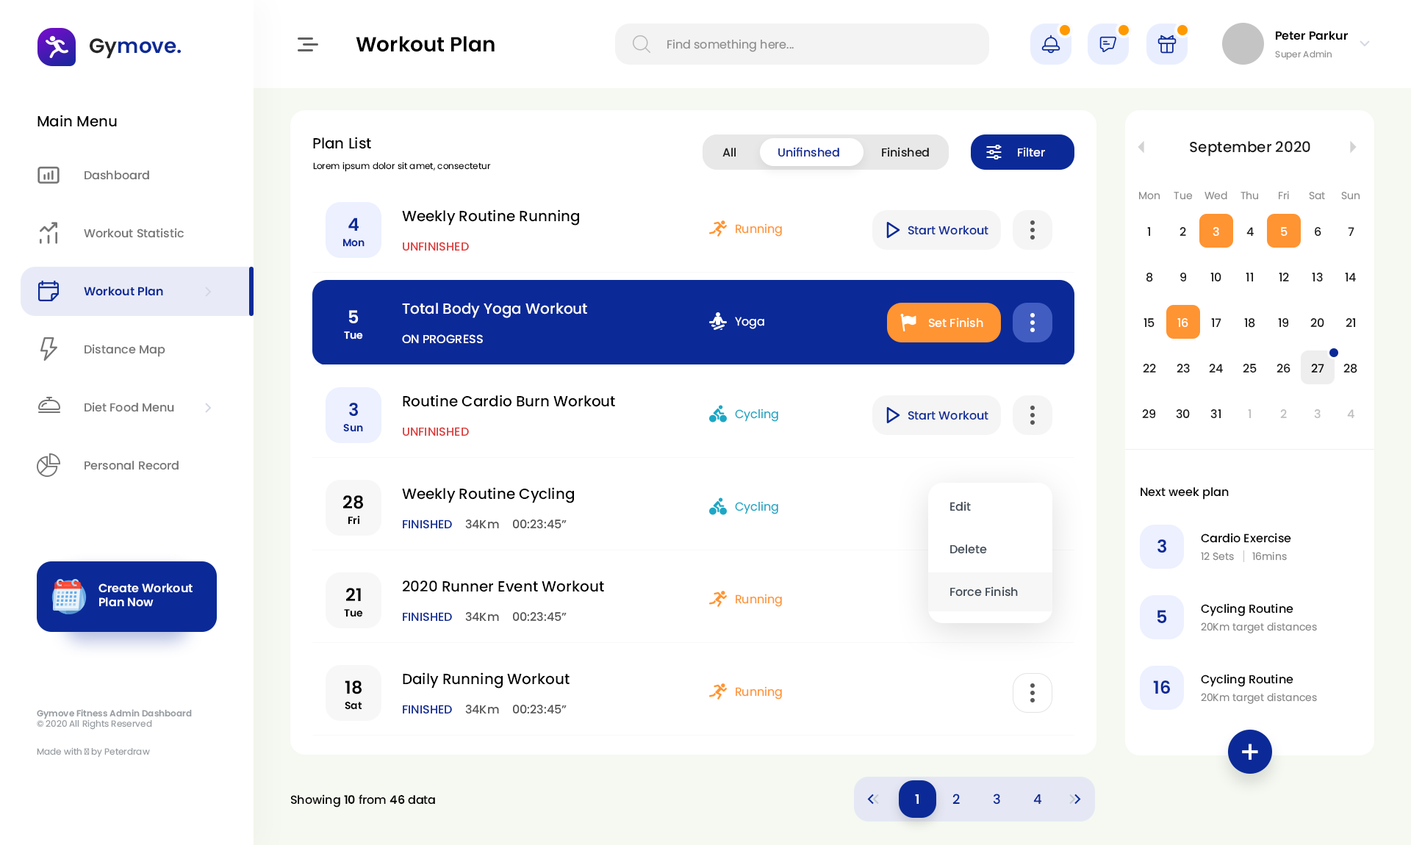
<style>
.page{position:relative;width:1411px;height:845px;background:#ffffff}
.page>*{position:absolute;margin:0}
.t1{font:20.6px "Poppins-SemiBold";color:#0b2a97}
.t2{font:20.6px "Poppins-SemiBold";color:#262626}
.t3{font:20.6px "Poppins-SemiBold";color:#000000}
.t4{font:11.8px "Poppins-Regular";color:#8d8d8d}
.t5{font:11.8px "Poppins-SemiBold";color:#000000}
.t6{font:8.8px "Poppins-Regular";color:#8f8f8f}
.t7{font:14.7px "Poppins-Medium";color:#000000}
.t8{font:11.8px "Poppins-Medium";color:#181818}
.t9{font:11.8px "Poppins-Medium";color:#0b2a97}
.t10{font:11.8px "Poppins-Medium";color:#ffffff}
.t11{font:14.7px "Poppins-Medium";color:#161616}
.t12{font:8.8px "Poppins-Regular";color:#000000}
.t13{font:11.8px "Poppins-Medium";color:#757575}
.t14{font:10.3px "Poppins-Regular";color:#8d8d8d}
.t15{font:17.6px "Poppins-SemiBold";color:#0b2a97}
.t16{font:11.8px "Poppins-Regular";color:#ff9432}
.t17{font:11.8px "Poppins-Medium";color:#161616}
.t18{font:10.3px "Poppins-SemiBold";color:#0b2a97}
.t19{font:11.8px "Poppins-Medium";color:#db3b3b;text-transform:uppercase}
.t20{font:11.8px "Poppins-SemiBold";color:#0b2a97}
.t21{font:14.7px "Poppins-Medium";color:#ffffff}
.t22{font:17.6px "Poppins-SemiBold";color:#ffffff}
.t23{font:11.8px "Poppins-Regular";color:#ffffff}
.t24{font:10.3px "Poppins-SemiBold";color:#ffffff}
.t25{font:11.8px "Poppins-Medium";color:#ffffff;text-transform:uppercase}
.t26{font:11.8px "Poppins-Medium";color:#000000}
.t27{font:11.8px "Poppins-Regular";color:#1ea7c5}
.t28{font:11.8px "Poppins-Medium";color:#bebebe}
.t29{font:17.6px "Poppins-SemiBold";color:#000000}
.t30{font:11.8px "Poppins-Medium";color:#3e4954}
.t31{font:10.3px "Poppins-SemiBold";color:#000000}
.t32{font:11.8px "Poppins-Medium";color:#0b2a97;text-transform:uppercase}
.t33{font:11.8px "Poppins-Medium";color:#535353}
.t34{font:10.3px "Poppins-Regular";color:#888888}
.t35{font:11.8px "Poppins-SemiBold";color:#ffffff}
.t36{font:8.8px "Poppins-SemiBold";color:#969ba0}
.t37{font:8.8px "Poppins-Regular";color:#969ba0}
.t38{font:13.2px "Poppins-SemiBold";color:#ffffff}
.t39{font:13.2px "Poppins-Medium";color:#0b2a97}
</style>
<div class="page">
<p class="t1" style="left:90px;top:38px;width:91px;height:21px"><span class="t2">Gy</span>move.</p>
<p class="t3" style="left:356px;top:36px;width:139px;height:16px">Workout Plan</p>
<p class="t4" style="left:667px;top:39px;width:127px;height:13px">Find something here...</p>
<p class="t5" style="left:1276px;top:31px;width:72px;height:9px">Peter Parkur</p>
<p class="t6" style="left:1275px;top:50px;width:57px;height:10px">Super Admin</p>
<p class="t7" style="left:37px;top:115px;width:80px;height:12px">Main Menu</p>
<p class="t7" style="left:313px;top:137px;width:58px;height:12px">Plan List</p>
<p class="t8" style="left:722px;top:148px;width:14px;height:9px">All</p>
<p class="t9" style="left:778px;top:147px;width:61px;height:10px">Unifinshed</p>
<p class="t8" style="left:882px;top:147px;width:47px;height:10px">Finished</p>
<p class="t10" style="left:1018px;top:147px;width:27px;height:10px">Filter</p>
<p class="t11" style="left:1190px;top:141px;width:120px;height:16px">September 2020</p>
<p class="t12" style="left:313px;top:162px;width:178px;height:10px">Lorem ipsum dolor sit amet, consectetur</p>
<p class="t13" style="left:85px;top:170px;width:64px;height:10px">Dashboard</p>
<p class="t14" style="left:1139px;top:192px;width:21px;height:8px">Mon</p>
<p class="t14" style="left:1174px;top:192px;width:19px;height:8px">Tue</p>
<p class="t14" style="left:1204px;top:191px;width:23px;height:9px">Wed</p>
<p class="t14" style="left:1240px;top:191px;width:18px;height:9px">Thu</p>
<p class="t14" style="left:1279px;top:191px;width:10px;height:9px">Fri</p>
<p class="t14" style="left:1309px;top:192px;width:16px;height:8px">Sat</p>
<p class="t14" style="left:1341px;top:192px;width:19px;height:8px">Sun</p>
<p class="t7" style="left:402px;top:209px;width:177px;height:17px">Weekly Routine Running</p>
<p class="t15" style="left:348px;top:218px;width:11px;height:13px">4</p>
<p class="t13" style="left:84px;top:228px;width:100px;height:10px">Workout Statistic</p>
<p class="t16" style="left:736px;top:223px;width:46px;height:14px">Running</p>
<p class="t9" style="left:908px;top:226px;width:80px;height:9px">Start Workout</p>
<p class="t17" style="left:1147px;top:227px;width:3px;height:9px">1</p>
<p class="t17" style="left:1179px;top:227px;width:7px;height:9px">2</p>
<p class="t10" style="left:1213px;top:227px;width:6px;height:9px">3</p>
<p class="t17" style="left:1246px;top:227px;width:8px;height:9px">4</p>
<p class="t10" style="left:1281px;top:227px;width:7px;height:9px">5</p>
<p class="t17" style="left:1315px;top:227px;width:6px;height:9px">6</p>
<p class="t17" style="left:1348px;top:227px;width:6px;height:9px">7</p>
<p class="t18" style="left:342px;top:239px;width:23px;height:8px">Mon</p>
<p class="t19" style="left:403px;top:242px;width:66px;height:9px">Unfinished</p>
<p class="t17" style="left:1146px;top:273px;width:7px;height:9px">8</p>
<p class="t17" style="left:1180px;top:273px;width:6px;height:8px">9</p>
<p class="t17" style="left:1210px;top:273px;width:11px;height:8px">10</p>
<p class="t17" style="left:1246px;top:273px;width:7px;height:8px">11</p>
<p class="t17" style="left:1279px;top:273px;width:10px;height:8px">12</p>
<p class="t17" style="left:1312px;top:273px;width:11px;height:8px">13</p>
<p class="t17" style="left:1345px;top:273px;width:11px;height:8px">14</p>
<p class="t20" style="left:84px;top:287px;width:79px;height:9px">Workout Plan</p>
<p class="t21" style="left:402px;top:303px;width:185px;height:15px">Total Body Yoga Workout</p>
<p class="t22" style="left:349px;top:310px;width:10px;height:13px">5</p>
<p class="t23" style="left:735px;top:317px;width:29px;height:12px">Yoga</p>
<p class="t10" style="left:929px;top:317px;width:54px;height:11px">Set Finish</p>
<p class="t17" style="left:1143px;top:318px;width:11px;height:9px">15</p>
<p class="t10" style="left:1177px;top:318px;width:11px;height:9px">16</p>
<p class="t17" style="left:1211px;top:318px;width:10px;height:9px">17</p>
<p class="t17" style="left:1244px;top:318px;width:11px;height:10px">18</p>
<p class="t17" style="left:1278px;top:318px;width:10px;height:9px">19</p>
<p class="t17" style="left:1310px;top:318px;width:14px;height:9px">20</p>
<p class="t17" style="left:1346px;top:318px;width:9px;height:9px">21</p>
<p class="t24" style="left:344px;top:331px;width:19px;height:9px">Tue</p>
<p class="t25" style="left:402px;top:334px;width:81px;height:9px">On Progress</p>
<p class="t13" style="left:85px;top:344px;width:80px;height:13px">Distance Map</p>
<p class="t17" style="left:1143px;top:364px;width:13px;height:9px">22</p>
<p class="t17" style="left:1177px;top:364px;width:13px;height:9px">23</p>
<p class="t17" style="left:1209px;top:364px;width:14px;height:9px">24</p>
<p class="t17" style="left:1243px;top:364px;width:14px;height:9px">25</p>
<p class="t17" style="left:1276px;top:364px;width:14px;height:9px">26</p>
<p class="t26" style="left:1311px;top:364px;width:13px;height:9px">27</p>
<p class="t17" style="left:1343px;top:364px;width:14px;height:9px">28</p>
<p class="t13" style="left:85px;top:402px;width:89px;height:10px">Diet Food Menu</p>
<p class="t7" style="left:403px;top:395px;width:212px;height:12px">Routine Cardio Burn Workout</p>
<p class="t15" style="left:349px;top:403px;width:9px;height:13px">3</p>
<p class="t27" style="left:735px;top:409px;width:43px;height:13px">Cycling</p>
<p class="t9" style="left:908px;top:411px;width:80px;height:9px">Start Workout</p>
<p class="t17" style="left:1142px;top:409px;width:13px;height:9px">29</p>
<p class="t17" style="left:1176px;top:409px;width:14px;height:9px">30</p>
<p class="t17" style="left:1210px;top:409px;width:11px;height:9px">31</p>
<p class="t28" style="left:1248px;top:409px;width:3px;height:9px">1</p>
<p class="t28" style="left:1280px;top:409px;width:7px;height:9px">2</p>
<p class="t28" style="left:1314px;top:409px;width:7px;height:9px">3</p>
<p class="t28" style="left:1347px;top:409px;width:7px;height:9px">4</p>
<p class="t18" style="left:343px;top:424px;width:20px;height:8px">Sun</p>
<p class="t19" style="left:403px;top:427px;width:66px;height:9px">Unfinished</p>
<p class="t13" style="left:85px;top:461px;width:94px;height:9px">Personal Record</p>
<p class="t29" style="left:343px;top:495px;width:20px;height:14px">28</p>
<p class="t7" style="left:402px;top:487px;width:172px;height:16px">Weekly Routine Cycling</p>
<p class="t26" style="left:1141px;top:487px;width:88px;height:13px">Next week plan</p>
<p class="t27" style="left:735px;top:501px;width:43px;height:13px">Cycling</p>
<p class="t30" style="left:950px;top:501px;width:21px;height:10px">Edit</p>
<p class="t31" style="left:348px;top:516px;width:12px;height:9px">Fri</p>
<p class="t32" style="left:403px;top:520px;width:49px;height:8px">Finished</p>
<p class="t33" style="left:465px;top:520px;width:34px;height:8px">34Km</p>
<p class="t33" style="left:513px;top:520px;width:54px;height:8px">00:23:45”</p>
<p class="t26" style="left:1201px;top:533px;width:90px;height:10px">Cardio Exercise</p>
<p class="t30" style="left:950px;top:545px;width:37px;height:9px">Delete</p>
<p class="t15" style="left:1157px;top:539px;width:9px;height:14px">3</p>
<p class="t34" style="left:1201px;top:552px;width:33px;height:9px">12 Sets</p>
<p class="t34" style="left:1252px;top:552px;width:35px;height:9px">16mins</p>
<p class="t7" style="left:403px;top:581px;width:201px;height:11px">2020 Runner Event Workout</p>
<p class="t35" style="left:98px;top:583px;width:95px;height:24px">Create Workout Plan Now</p>
<p class="t29" style="left:346px;top:588px;width:15px;height:13px">21</p>
<p class="t16" style="left:736px;top:594px;width:46px;height:13px">Running</p>
<p class="t30" style="left:950px;top:586px;width:68px;height:11px">Force Finish</p>
<p class="t26" style="left:1201px;top:603px;width:92px;height:14px">Cycling Routine</p>
<p class="t31" style="left:344px;top:609px;width:19px;height:8px">Tue</p>
<p class="t32" style="left:403px;top:612px;width:49px;height:9px">Finished</p>
<p class="t33" style="left:465px;top:612px;width:34px;height:9px">34Km</p>
<p class="t33" style="left:513px;top:612px;width:54px;height:9px">00:23:45”</p>
<p class="t15" style="left:1157px;top:610px;width:10px;height:13px">5</p>
<p class="t34" style="left:1201px;top:622px;width:116px;height:11px">20Km target distances</p>
<p class="t7" style="left:403px;top:672px;width:167px;height:17px">Daily Running Workout</p>
<p class="t26" style="left:1201px;top:674px;width:92px;height:13px">Cycling Routine</p>
<p class="t29" style="left:345px;top:681px;width:17px;height:13px">18</p>
<p class="t16" style="left:736px;top:686px;width:46px;height:14px">Running</p>
<p class="t15" style="left:1153px;top:681px;width:17px;height:13px">16</p>
<p class="t31" style="left:345px;top:702px;width:17px;height:8px">Sat</p>
<p class="t34" style="left:1201px;top:693px;width:116px;height:11px">20Km target distances</p>
<p class="t36" style="left:37px;top:709px;width:155px;height:21px">Gymove Fitness Admin Dashboard<br><span class="t37">© 2020 All Rights Reserved</span></p>
<p class="t32" style="left:403px;top:705px;width:49px;height:9px">Finished</p>
<p class="t33" style="left:465px;top:705px;width:34px;height:9px">34Km</p>
<p class="t33" style="left:513px;top:705px;width:54px;height:9px">00:23:45”</p>
<p class="t37" style="left:37px;top:747px;width:113px;height:11px">Made with ♥ by Peterdraw</p>
<p class="t26" style="left:291px;top:794px;width:144px;height:14px">Showing <span class="t5">10 </span>from <span class="t5">46 </span>data</p>
<p class="t38" style="left:915px;top:794px;width:4px;height:10px">1</p>
<p class="t39" style="left:952px;top:794px;width:8px;height:10px">2</p>
<p class="t39" style="left:993px;top:794px;width:7px;height:11px">3</p>
<p class="t39" style="left:1033px;top:794px;width:9px;height:11px">4</p>
</div>
